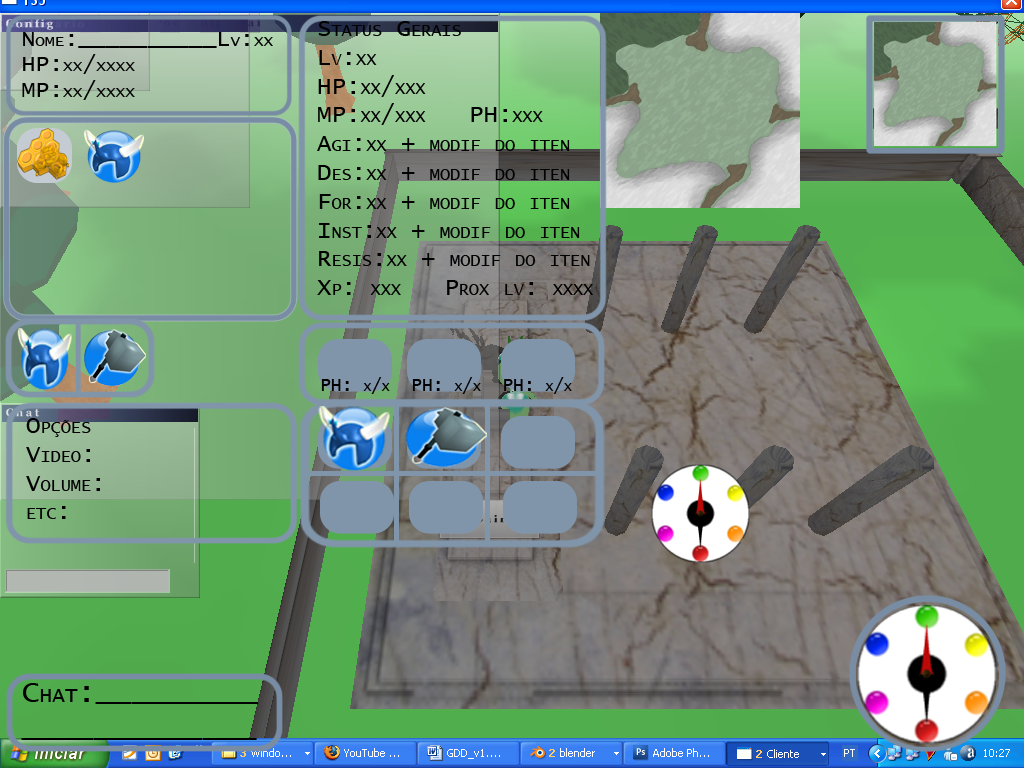
<style>
.page{position:relative;width:1024px;height:768px}
.page>*{position:absolute;margin:0}
.t1{font:24px "LucidaConsole";color:#010101;font-variant:small-caps}
.t2{font:21.5px "LucidaConsole";color:#010101;font-variant:small-caps;scale:1.07 1}
.t3{font:18px "LucidaConsole";color:#010101;font-variant:small-caps}
.t4{font:30px "LucidaConsole";color:#010101;font-variant:small-caps}
</style>
<div class="page">
<p class="t1" style="left:317px;top:21px;width:276px;height:274px">Status Gerais<br>Lv:xx<br>HP:xx/xxx<br>MP:xx/xxx   PH:xxx  <br>Agi:xx + modif do iten<br>Des:xx + modif do iten<br>For:xx + modif do iten<br>Inst:xx + modif do iten<br>Resis:xx + modif do iten<br>Xp: xxx   Prox lv: xxxx</p>
<p class="t2" style="left:22px;top:32px;width:251px;height:68px">Nome:__________Lv:xx<br>HP:xx/xxxx <br>MP:xx/xxxx</p>
<p class="t3" style="left:321px;top:377px;width:251px;height:17px">PH: x/x  PH: x/x  PH: x/x</p>
<p class="t1" style="left:26px;top:418px;width:74px;height:101px">Opções<br>Video:<br>Volume:<br>etc:</p>
<p class="t4" style="left:21px;top:683px;width:238px;height:57px">Chat:_________<br>_____________</p>
</div>
